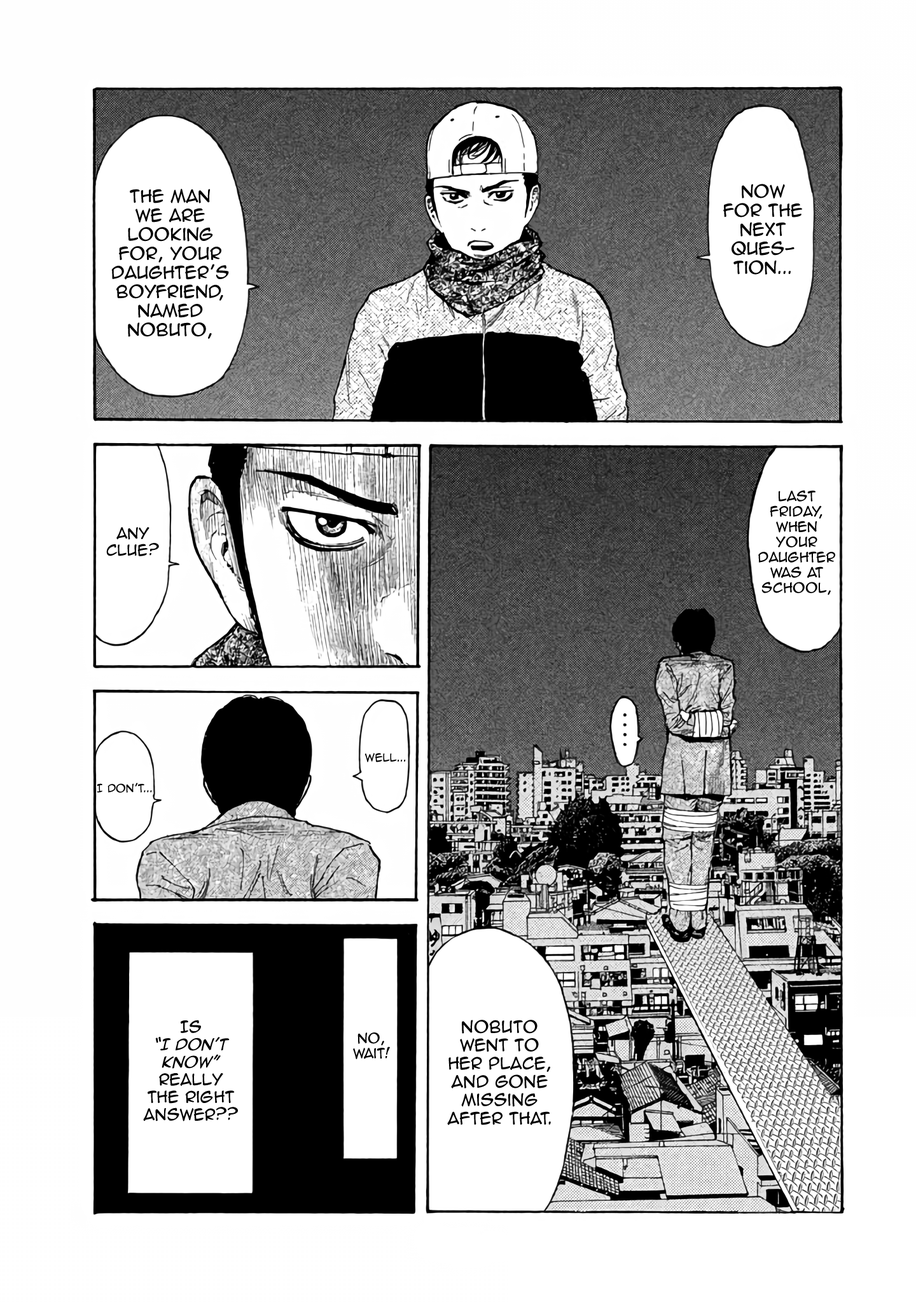
<style>
.page{position:relative;width:916px;height:1302px;background:#ffffff}
.page>*{position:absolute;margin:0}
.t1{font:15.9px "AnimeAce2.0BB";color:#000000}
.t2{font:12.7px "AnimeAce2.0BB";color:#000000}
.t3{font:14px "AnimeAce2.0BB";color:#000000}
.t4{font:10.2px "AnimeAce2.0BB";color:#000000}
.t5{font:14.6px "AnimeAce2.0BB";color:#000000}
.t6{font:14.6px "AnimeAce2.0BB-Italic";color:#000000}
.t7{font:15.3px "AnimeAce2.0BB";color:#000000}
</style>
<div class="page">
<p class="t1" style="left:723px;top:184px;width:79px;height:91px;text-align:center">Now for the next ques-<br>tion...</p>
<p class="t1" style="left:111px;top:189px;width:118px;height:150px;text-align:center">The man <br>we are <br>looking for, your daughter’s boyfriend, named Nobuto,</p>
<p class="t2" style="left:758px;top:490px;width:77px;height:105px;text-align:center">Last Friday, when your daughter was at school,</p>
<p class="t3" style="left:106px;top:527px;width:53px;height:29px;text-align:center">Any clue?</p>
<p class="t4" style="left:364px;top:753px;width:42px;height:9px">Well...</p>
<p class="t4" style="left:97px;top:783px;width:55px;height:10px">I don’t...</p>
<p class="t5" style="left:143px;top:1020px;width:95px;height:102px;text-align:center">Is <br><span class="t6">“I don’t know”</span> really <br>the right answer??</p>
<p class="t7" style="left:447px;top:1020px;width:104px;height:105px;text-align:center">Nobuto <br>went to <br>her place, and gone missing after that.</p>
<p class="t2" style="left:353px;top:1033px;width:37px;height:26px;text-align:center">No, wait!</p>
</div>
